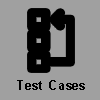
<style>
.page{position:relative;width:100px;height:100px;background:#a0a0a0}
.page>*{position:absolute;margin:0}
.t1{font:13.3px "Arial-BoldMT";letter-spacing:0.15em;color:#000000;scale:0.8 1}
</style>
<div class="page">
<p class="t1" style="left:17px;top:80px;width:68px;height:10px">Test Cases</p>
</div>
